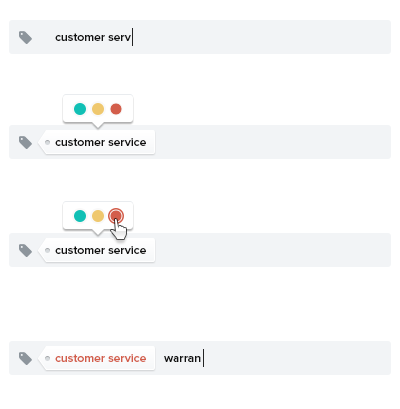
<style>
.page{position:relative;width:400px;height:409px;background:#ffffff}
.page>*{position:absolute;margin:0}
.t1{font:12px "ProximaNova-Semibold";color:#111111}
.t2{font:12px "ProximaNova-Semibold";color:#d35e4b}
</style>
<div class="page">
<p class="t1" style="left:55px;top:33px;width:76px;height:8px">customer serv</p>
<p class="t1" style="left:55px;top:138px;width:91px;height:8px">customer service</p>
<p class="t1" style="left:55px;top:246px;width:91px;height:8px">customer service</p>
<p class="t2" style="left:55px;top:354px;width:91px;height:8px">customer service</p>
<p class="t1" style="left:164px;top:356px;width:37px;height:6px">warran</p>
</div>
